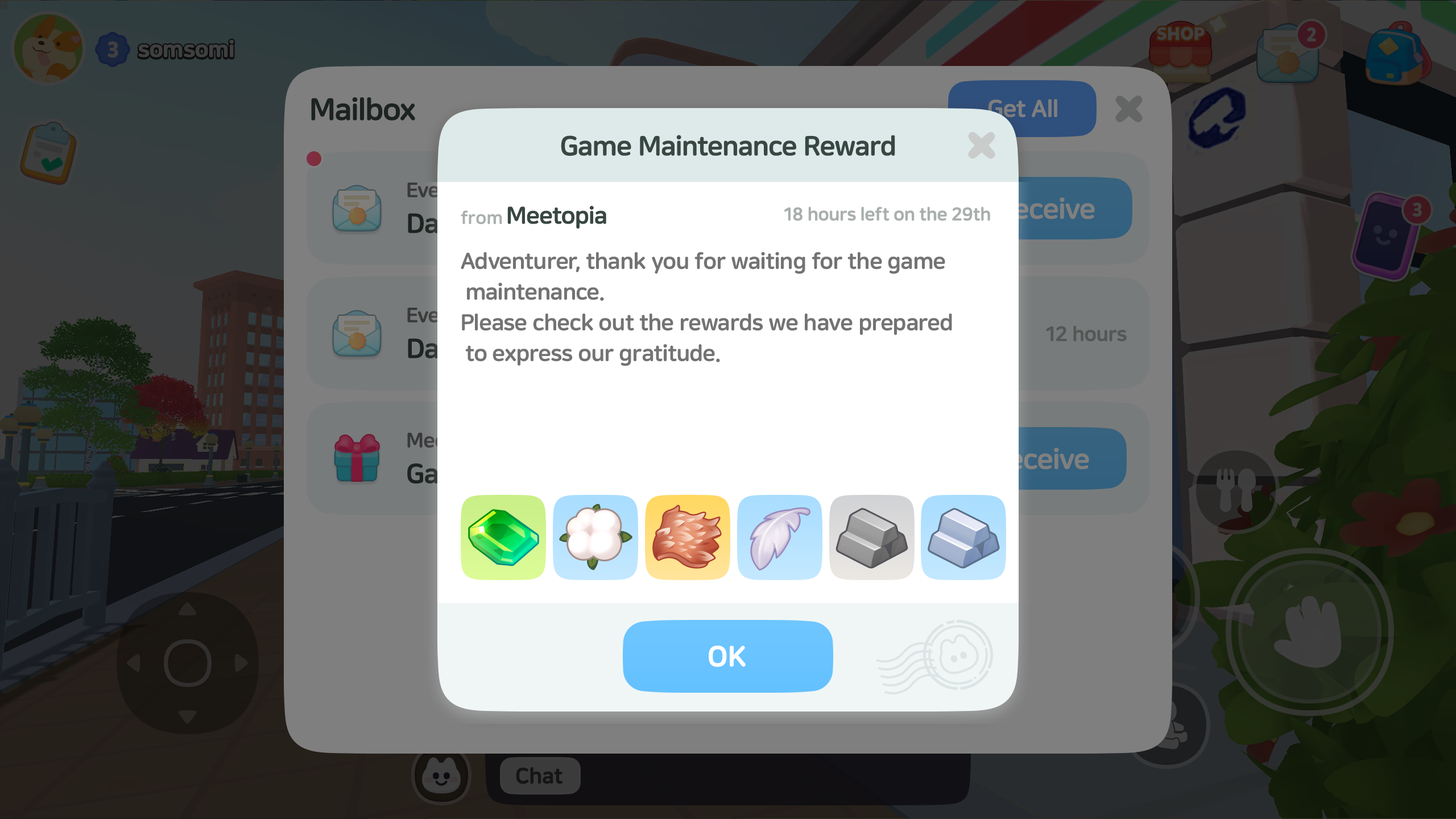
<style>
.page{position:relative;width:1456px;height:819px}
.page>*{position:absolute;margin:0}
.t1{font:27.3px "NanumSquareRoundOTFEB";letter-spacing:-0.02em;color:#384742}
.t2{font:23.9px "NanumSquareRoundOTFEB";letter-spacing:-0.02em;color:#384742}
.t3{font:18.2px "NanumSquareRoundOTFEB";letter-spacing:-0.02em;color:#a9afad}
.t4{font:18.2px "NanumSquareRoundOTFEB";color:#a9afad}
.t5{font:22.7px/30.7px "NanumSquareRoundOTFEB";letter-spacing:-0.02em;color:#737373}
.t6{font:28.4px "NanumSquareRoundOTFEB";letter-spacing:-0.02em;color:#ffffff;font-weight:bold}
</style>
<div class="page">
<p class="t1" style="left:561px;top:135px;width:334px;height:21px">Game Maintenance Reward</p>
<p class="t2" style="left:507px;top:206px;width:99px;height:23px">Meetopia</p>
<p class="t3" style="left:784px;top:206px;width:206px;height:15px">18 hours left on the 29th</p>
<p class="t4" style="left:461px;top:210px;width:41px;height:15px">from</p>
<p class="t5" style="left:461px;top:252px;width:491px;height:114px">Adventurer, thank you for waiting for the game<br> maintenance.<br>Please check out the rewards we have prepared<br> to express our gratitude.</p>
<p class="t6" style="left:709px;top:646px;width:37px;height:21px">OK</p>
</div>
